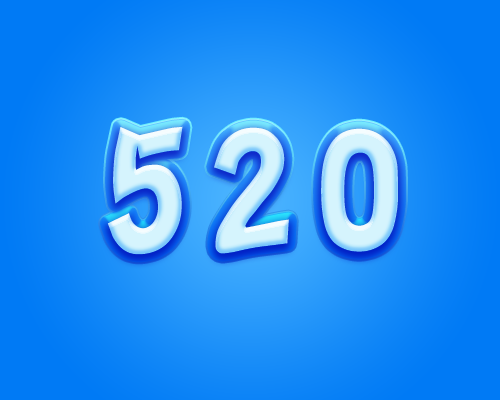
<style>
.page{position:relative;width:500px;height:400px}
.page>*{position:absolute;margin:0}
.t1{font:178.5px "HYo3gj";letter-spacing:0.1em}
</style>
<div class="page">
<p class="t1" style="left:107px;top:126px;width:291px;height:129px">520</p>
<p class="t1" style="left:107px;top:126px;width:291px;height:129px">520</p>
<p class="t1" style="left:107px;top:126px;width:291px;height:129px">520</p>
</div>
